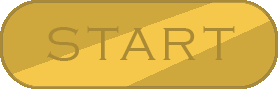
<style>
.page{position:relative;width:278px;height:89px;background:#cea73d}
.page>*{position:absolute;margin:0}
.t1{font:48px "CopperplateGothic-Light";letter-spacing:0.1em;color:#aa8a35}
</style>
<div class="page">
<p class="t1" style="left:47px;top:26px;width:188px;height:35px">START</p>
</div>
